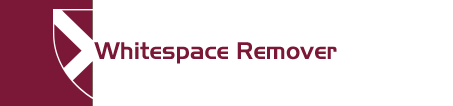
<style>
.page{position:relative;width:453px;height:106px;background:#ffffff}
.page>*{position:absolute;margin:0}
.t1{font:24px "Slicker";color:#7c1837}
</style>
<div class="page">
<p class="t1" style="left:94px;top:42px;width:243px;height:22px">Whitespace Remover</p>
</div>
